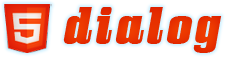
<style>
.page{position:relative;width:226px;height:57px;background:#ffffff}
.page>*{position:absolute;margin:0}
.t1{font:48px "BullpenHv-Italic";color:#e73100}
</style>
<div class="page">
<p class="t1" style="left:63px;top:7px;width:159px;height:46px">dialog</p>
</div>
